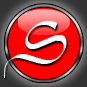
<style>
.page{position:relative;width:87px;height:87px;background:#ff0000}
.page>*{position:absolute;margin:0}
.t1{font:59.4px "Aladdin";color:#fffefe}
</style>
<div class="page">
<p class="t1" style="left:4px;top:21px;width:63px;height:57px">S</p>
</div>
